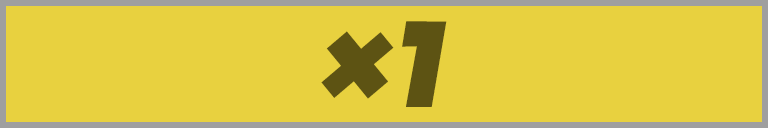
<style>
.page{position:relative;width:768px;height:128px;background:#e8d13f}
.page>*{position:absolute;margin:0}
.t1{font:91.7px "GN-KMBFont-UB-NewstyleKanaA";color:#5d5313;font-style:italic}
</style>
<div class="page">
<p class="t1" style="left:321px;top:21px;width:126px;height:86px">×1</p>
</div>
